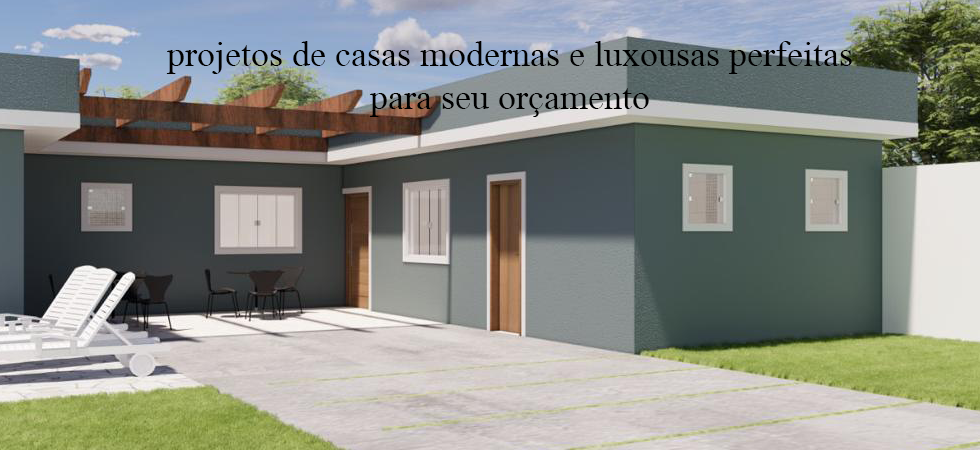
<style>
.page{position:relative;width:980px;height:450px}
.page>*{position:absolute;margin:0}
.t1{font:36px "MongolianBaiti";color:#000000}
</style>
<div class="page">
<p class="t1" style="left:166px;top:41px;width:686px;height:76px;text-align:center">projetos de casas modernas e luxousas perfeitas para seu orçamento</p>
</div>
